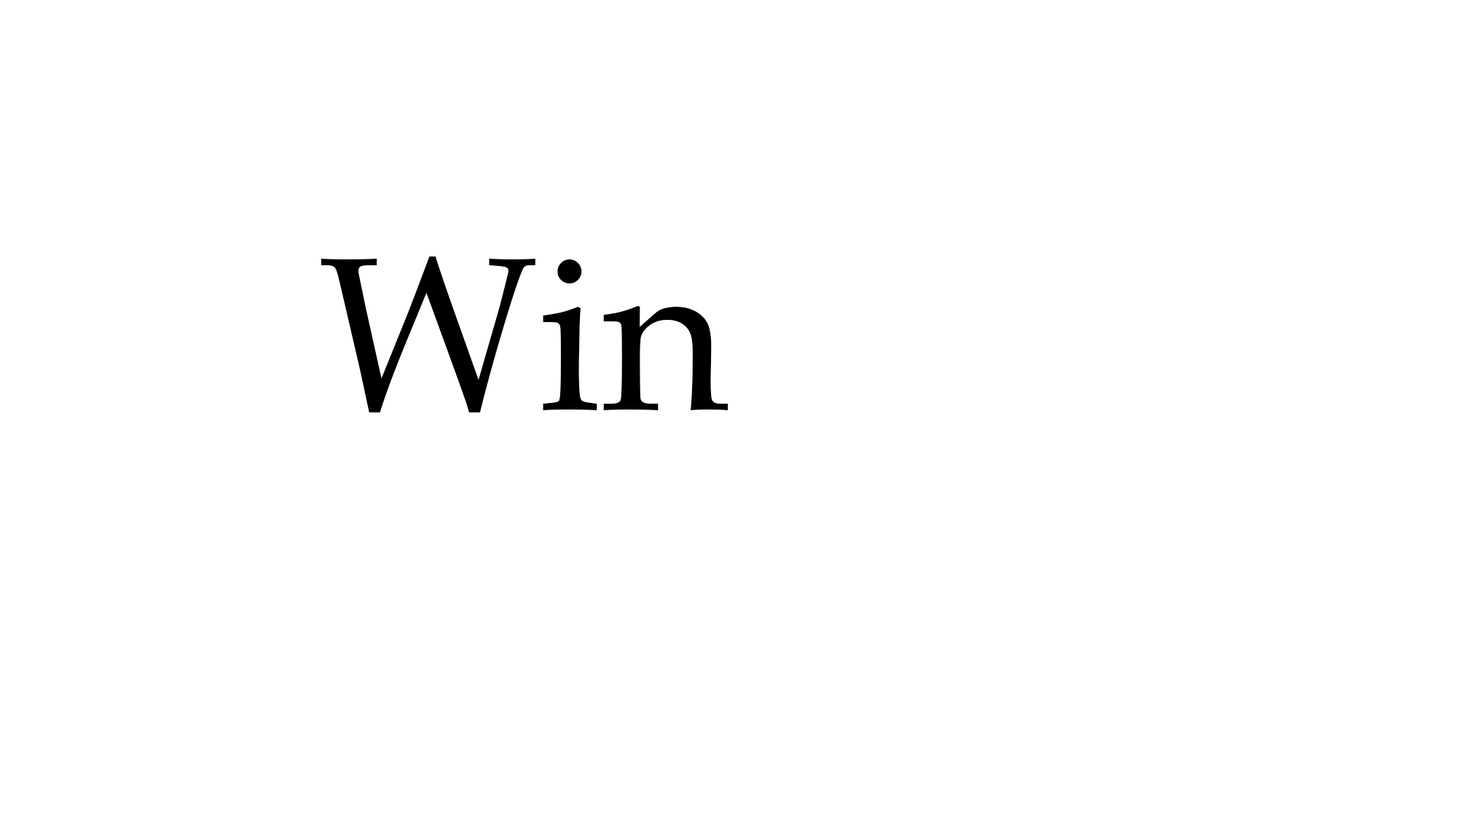
<style>
.page{position:relative;width:1457px;height:819px;background:#ffffff}
.page>*{position:absolute;margin:0}
.t1{font:218.5px "BookAntiqua";color:#000000}
</style>
<div class="page">
<p class="t1" style="left:321px;top:256px;width:407px;height:156px">Win</p>
</div>
